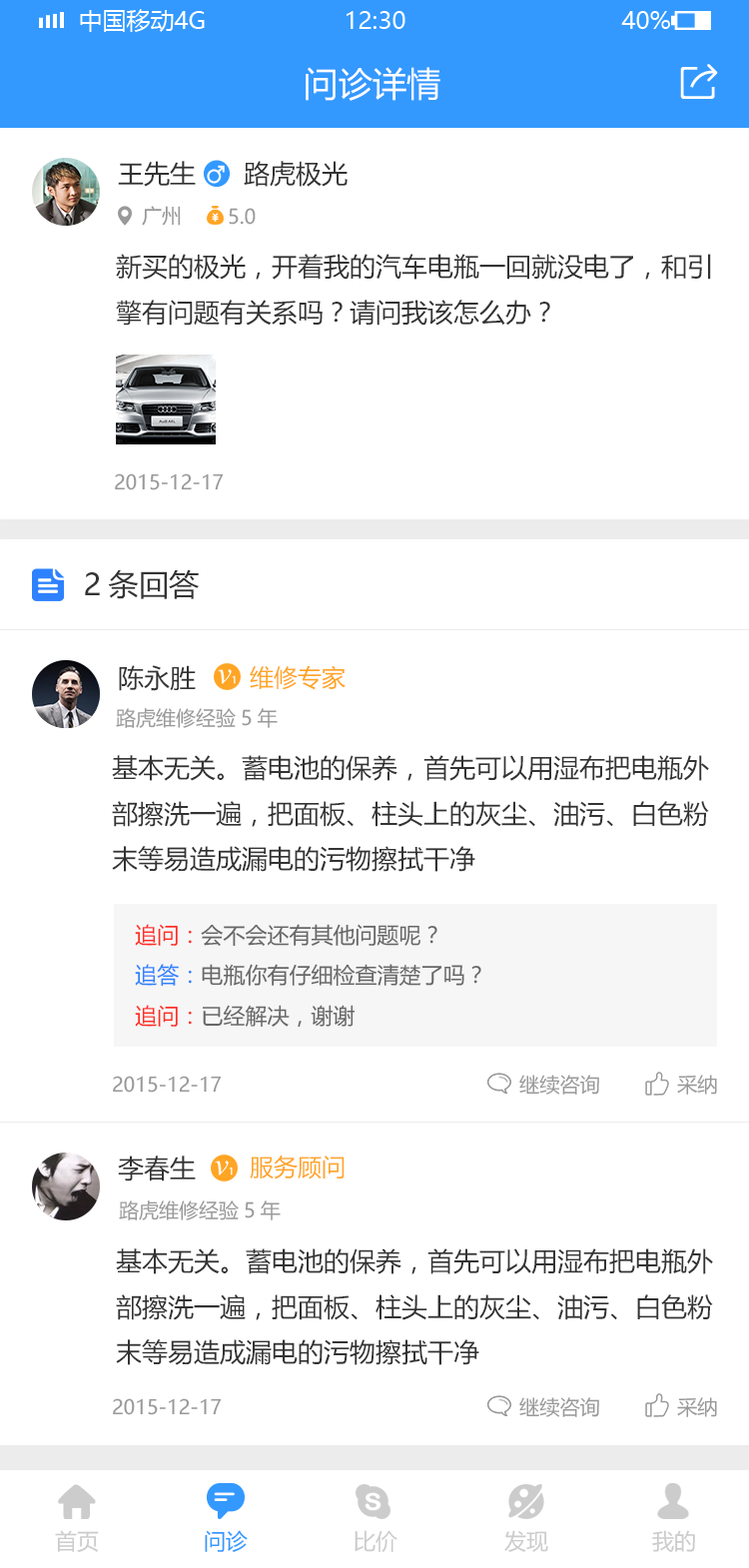
<style>
.page{position:relative;width:749px;height:1568px;background:#ffffff}
.page>*{position:absolute;margin:0}
.t1{font:34px "MicrosoftYaHei";color:#ffffff}
.t2{font:26px "MicrosoftYaHei";color:#333333}
.t3{font:20px "MicrosoftYaHei";color:#999999}
.t4{font:30px "MicrosoftYaHei";color:#333333}
.t5{font:24px "MicrosoftYaHei";color:#ffa525}
.t6{font:22px "MicrosoftYaHei";color:#666666}
.t7{font:22px "MicrosoftYaHei";color:#ff2e24}
.t8{font:22px "MicrosoftYaHei";color:#2e82ff}
.t9{font:22px "MicrosoftYaHei";color:#cccccc}
.t10{font:22px "MicrosoftYaHei";color:#3399ff}
</style>
<div class="page">
<p class="t1" style="left:306px;top:67px;width:134px;height:34px">问诊详情</p>
<p class="t2" style="left:118px;top:161px;width:78px;height:26px">王先生</p>
<p class="t2" style="left:118px;top:161px;width:78px;height:26px">王先生</p>
<p class="t2" style="left:244px;top:161px;width:104px;height:26px">路虎极光</p>
<p class="t2" style="left:244px;top:161px;width:104px;height:26px">路虎极光</p>
<p class="t3" style="left:142px;top:206px;width:39px;height:20px">广州</p>
<p class="t3" style="left:142px;top:206px;width:39px;height:20px">广州</p>
<p class="t3" style="left:229px;top:208px;width:27px;height:17px">5.0</p>
<p class="t3" style="left:229px;top:208px;width:27px;height:17px">5.0</p>
<p class="t2" style="left:116px;top:254px;width:595px;height:72px">新买的极光，开着我的汽车电瓶一回就没电了，和引<br>擎有问题有关系吗？请问我该怎么办？</p>
<p class="t2" style="left:116px;top:254px;width:595px;height:72px">新买的极光，开着我的汽车电瓶一回就没电了，和引<br>擎有问题有关系吗？请问我该怎么办？</p>
<p class="t3" style="left:115px;top:473px;width:109px;height:17px">2015-12-17</p>
<p class="t3" style="left:115px;top:473px;width:109px;height:17px">2015-12-17</p>
<p class="t4" style="left:85px;top:570px;width:114px;height:29px">2条回答</p>
<p class="t2" style="left:119px;top:665px;width:77px;height:26px">陈永胜</p>
<p class="t5" style="left:250px;top:665px;width:96px;height:25px">维修专家</p>
<p class="t3" style="left:116px;top:708px;width:162px;height:20px">路虎维修经验5年</p>
<p class="t2" style="left:112px;top:755px;width:597px;height:117px">基本无关。蓄电池的保养，首先可以用湿布把电瓶外<br>部擦洗一遍，把面板、柱头上的灰尘、油污、白色粉<br>末等易造成漏电的污物擦拭干净</p>
<p class="t6" style="left:135px;top:924px;width:302px;height:23px"><span class="t7">追问：</span>会不会还有其他问题呢？</p>
<p class="t6" style="left:135px;top:924px;width:302px;height:23px"><span class="t7">追问：</span>会不会还有其他问题呢？</p>
<p class="t6" style="left:135px;top:964px;width:346px;height:23px"><span class="t8">追答：</span>电瓶你有仔细检查清楚了吗？</p>
<p class="t6" style="left:135px;top:964px;width:346px;height:23px"><span class="t8">追答：</span>电瓶你有仔细检查清楚了吗？</p>
<p class="t6" style="left:135px;top:1005px;width:221px;height:23px"><span class="t7">追问：</span>已经解决，谢谢</p>
<p class="t6" style="left:135px;top:1005px;width:221px;height:23px"><span class="t7">追问：</span>已经解决，谢谢</p>
<p class="t3" style="left:113px;top:1076px;width:109px;height:17px">2015-12-17</p>
<p class="t3" style="left:519px;top:1075px;width:80px;height:20px">继续咨询</p>
<p class="t3" style="left:677px;top:1075px;width:40px;height:20px">采纳</p>
<p class="t2" style="left:118px;top:1156px;width:78px;height:25px">李春生</p>
<p class="t5" style="left:250px;top:1155px;width:95px;height:24px">服务顾问</p>
<p class="t3" style="left:119px;top:1200px;width:162px;height:20px">路虎维修经验5年</p>
<p class="t2" style="left:116px;top:1248px;width:597px;height:117px">基本无关。蓄电池的保养，首先可以用湿布把电瓶外<br>部擦洗一遍，把面板、柱头上的灰尘、油污、白色粉<br>末等易造成漏电的污物擦拭干净</p>
<p class="t3" style="left:519px;top:1397px;width:80px;height:20px">继续咨询</p>
<p class="t3" style="left:677px;top:1397px;width:40px;height:20px">采纳</p>
<p class="t3" style="left:113px;top:1398px;width:109px;height:17px">2015-12-17</p>
<p class="t9" style="left:55px;top:1530px;width:44px;height:22px">首页</p>
<p class="t10" style="left:205px;top:1530px;width:43px;height:22px">问诊</p>
<p class="t9" style="left:355px;top:1530px;width:42px;height:22px">比价</p>
<p class="t9" style="left:504px;top:1530px;width:44px;height:22px">发现</p>
<p class="t9" style="left:652px;top:1530px;width:43px;height:22px">我的</p>
</div>
